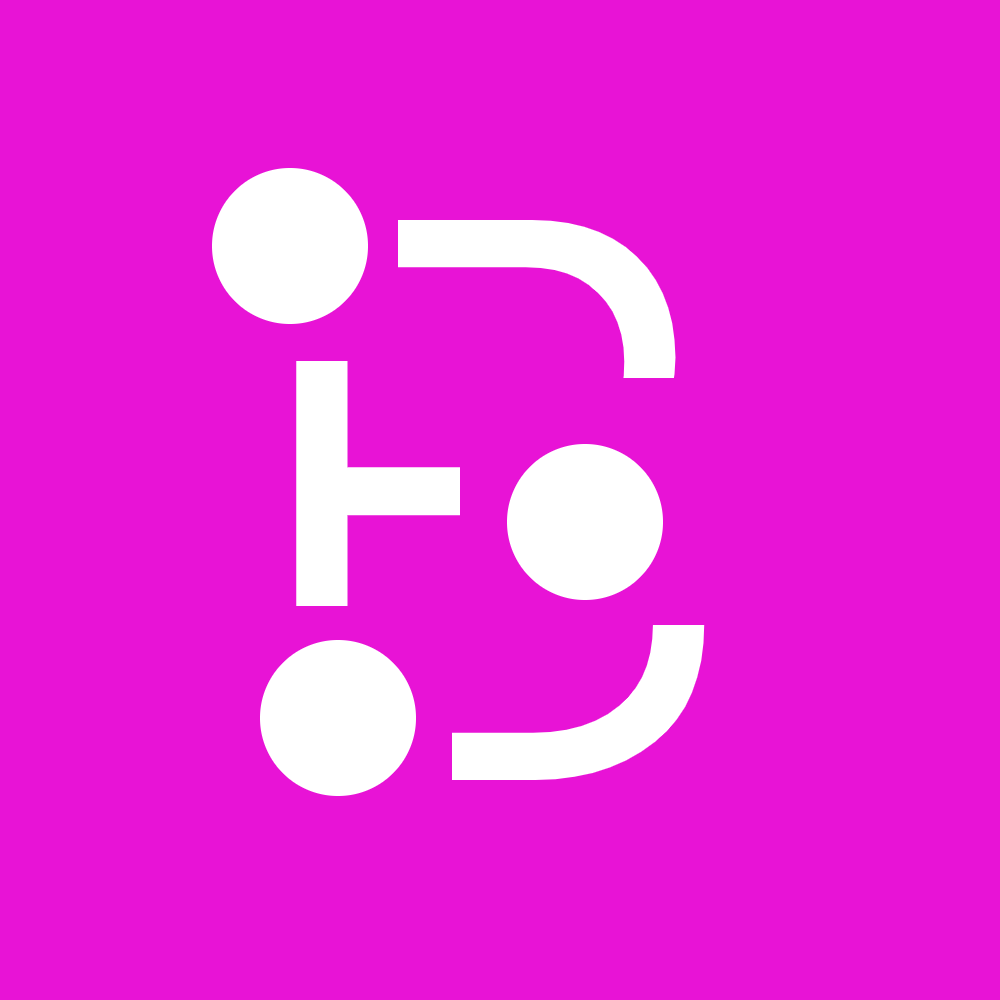
<style>
.page{position:relative;width:1000px;height:1000px;background:#e813d6}
.page>*{position:absolute;margin:0}
.t1{font:800px "Quicksand-Regular";color:#ffffff}
</style>
<div class="page">
<p class="t1" style="left:296px;top:220px;width:409px;height:560px">B</p>
</div>
